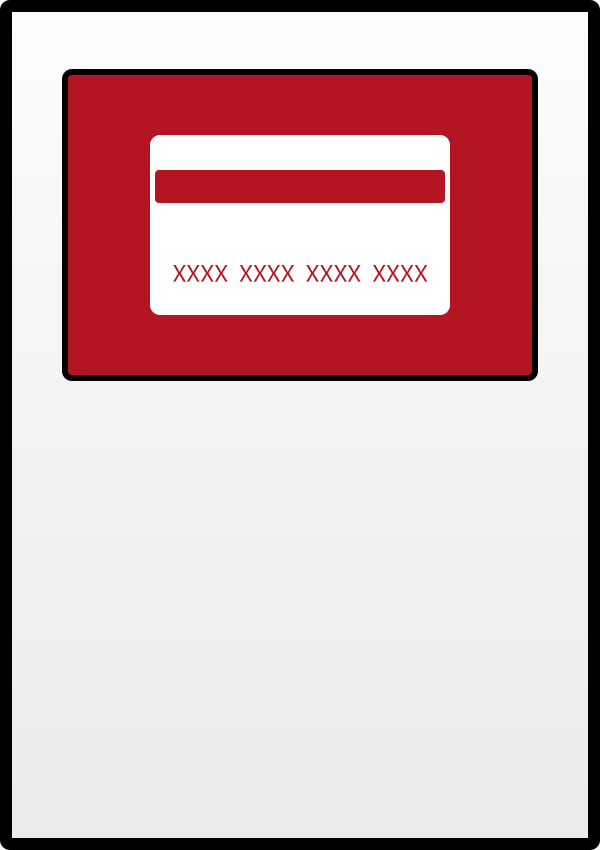
<style>
.page{position:relative;width:600px;height:850px}
.page>*{position:absolute;margin:0}
.t1{font:25px "MyriadPro-Regular";color:#b31622}
</style>
<div class="page">
<p class="t1" style="left:173px;top:265px;width:255px;height:17px">XXXX  XXXX  XXXX  XXXX</p>
</div>
